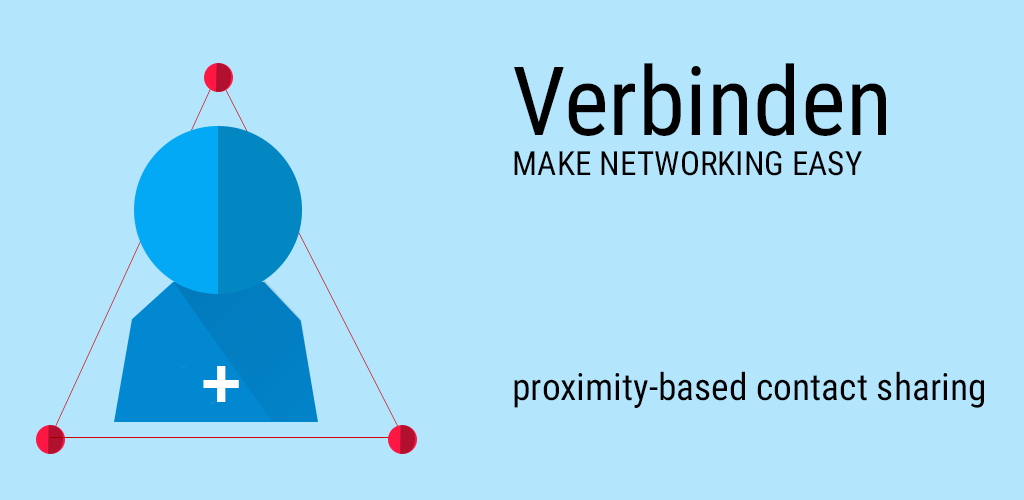
<style>
.page{position:relative;width:1024px;height:500px;background:#b3e5fc}
.page>*{position:absolute;margin:0}
.t1{font:37.5px "RobotoCondensed-Regular";color:#000000}
.t2{font:95.8px "RobotoCondensed-Regular";color:#000000}
.t3{font:33.3px "RobotoCondensed-Regular";color:#000000}
</style>
<div class="page">
<p class="t1" style="left:514px;top:63px;width:470px;height:345px"><span class="t2">Verbinden<br></span><span class="t3">MAKE NETWORKING EASY<br><br><br><br></span>proximity-based contact sharing</p>
</div>
